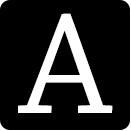
<style>
.page{position:relative;width:131px;height:131px;background:#000000}
.page>*{position:absolute;margin:0}
.t1{font:150px "ChaparralPro-Regular";color:#ffffff}
</style>
<div class="page">
<p class="t1" style="left:18px;top:13px;width:95px;height:100px">A</p>
</div>
